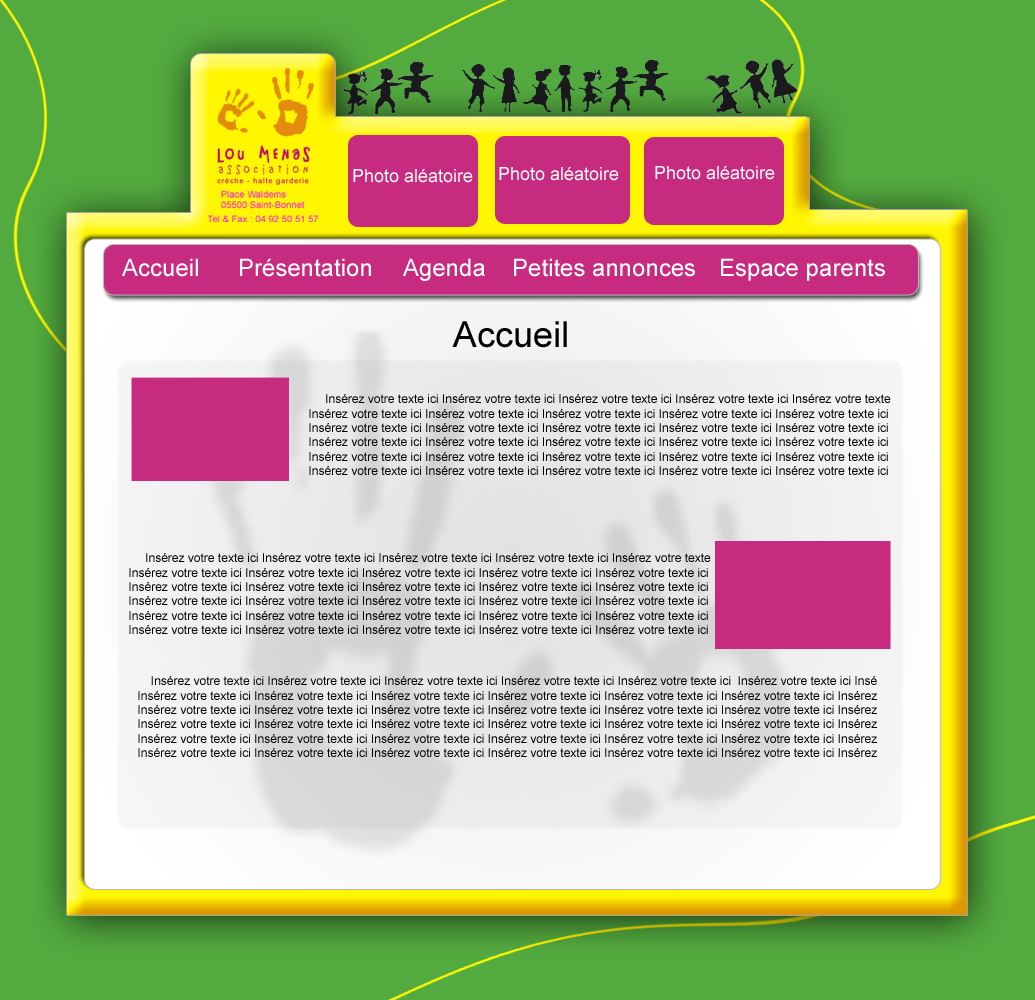
<style>
.page{position:relative;width:1035px;height:1000px}
.page>*{position:absolute;margin:0}
.t1{font:18px "ArialMT";color:#ffffff}
.t2{font:24px "ArialMT";color:#ffffff}
.t3{font:36px "ArialMT";color:#000000}
.t4{font:12px "ArialMT";color:#000000}
</style>
<div class="page">
<p class="t1" style="left:353px;top:169px;width:120px;height:14px">Photo aléatoire</p>
<p class="t1" style="left:499px;top:167px;width:120px;height:14px">Photo aléatoire</p>
<p class="t1" style="left:655px;top:166px;width:120px;height:14px">Photo aléatoire</p>
<p class="t2" style="left:122px;top:258px;width:76px;height:19px">Accueil</p>
<p class="t2" style="left:240px;top:258px;width:131px;height:19px">Présentation</p>
<p class="t2" style="left:403px;top:258px;width:82px;height:23px">Agenda</p>
<p class="t2" style="left:514px;top:258px;width:181px;height:19px">Petites annonces</p>
<p class="t2" style="left:721px;top:258px;width:164px;height:23px">Espace parents</p>
<p class="t3" style="left:452px;top:321px;width:115px;height:27px">Accueil</p>
<p class="t4" style="left:309px;top:394px;width:582px;height:81px">Insérez votre texte ici Insérez votre texte ici Insérez votre texte ici Insérez votre texte ici Insérez votre texte<br>Insérez votre texte ici Insérez votre texte ici Insérez votre texte ici Insérez votre texte ici Insérez votre texte ici <br>Insérez votre texte ici Insérez votre texte ici Insérez votre texte ici Insérez votre texte ici Insérez votre texte ici <br>Insérez votre texte ici Insérez votre texte ici Insérez votre texte ici Insérez votre texte ici Insérez votre texte ici <br>Insérez votre texte ici Insérez votre texte ici Insérez votre texte ici Insérez votre texte ici Insérez votre texte ici <br>Insérez votre texte ici Insérez votre texte ici Insérez votre texte ici Insérez votre texte ici Insérez votre texte ici</p>
<p class="t4" style="left:129px;top:553px;width:582px;height:81px">Insérez votre texte ici Insérez votre texte ici Insérez votre texte ici Insérez votre texte ici Insérez votre texte <br>Insérez votre texte ici Insérez votre texte ici Insérez votre texte ici Insérez votre texte ici Insérez votre texte ici <br>Insérez votre texte ici Insérez votre texte ici Insérez votre texte ici Insérez votre texte ici Insérez votre texte ici <br>Insérez votre texte ici Insérez votre texte ici Insérez votre texte ici Insérez votre texte ici Insérez votre texte ici <br>Insérez votre texte ici Insérez votre texte ici Insérez votre texte ici Insérez votre texte ici Insérez votre texte ici <br>Insérez votre texte ici Insérez votre texte ici Insérez votre texte ici Insérez votre texte ici Insérez votre texte ici</p>
<p class="t4" style="left:138px;top:676px;width:739px;height:81px">Insérez votre texte ici Insérez votre texte ici Insérez votre texte ici Insérez votre texte ici Insérez votre texte ici  Insérez votre texte ici Insé<br>Insérez votre texte ici Insérez votre texte ici Insérez votre texte ici Insérez votre texte ici Insérez votre texte ici Insérez votre texte ici Insérez <br>Insérez votre texte ici Insérez votre texte ici Insérez votre texte ici Insérez votre texte ici Insérez votre texte ici Insérez votre texte ici Insérez <br>Insérez votre texte ici Insérez votre texte ici Insérez votre texte ici Insérez votre texte ici Insérez votre texte ici Insérez votre texte ici Insérez <br>Insérez votre texte ici Insérez votre texte ici Insérez votre texte ici Insérez votre texte ici Insérez votre texte ici Insérez votre texte ici Insérez <br>Insérez votre texte ici Insérez votre texte ici Insérez votre texte ici Insérez votre texte ici Insérez votre texte ici Insérez votre texte ici Insérez</p>
</div>
